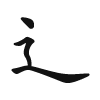
<style>
.page{position:relative;width:100px;height:100px;background:#ffffff}
.page>*{position:absolute;margin:0}
.t1{font:90px "STKaiti";letter-spacing:0.025em;color:#121212;font-weight:bold}
</style>
<div class="page">
<p class="t1" style="left:11px;top:17px;width:79px;height:66px">辶</p>
</div>
